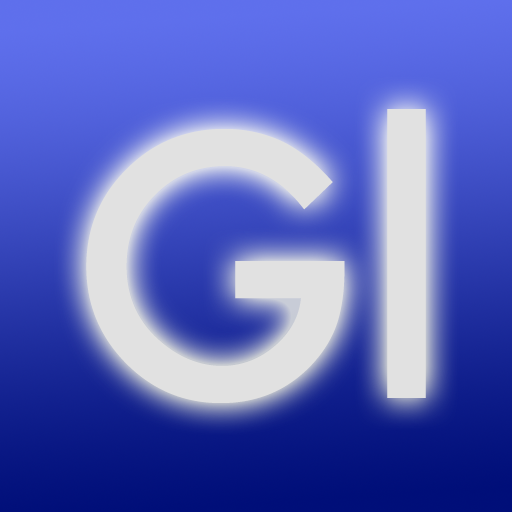
<style>
.page{position:relative;width:512px;height:512px}
.page>*{position:absolute;margin:0}
.t1{font:350px "Futura-Medium";color:#e1e1e1}
</style>
<div class="page">
<p class="t1" style="left:86px;top:109px;width:340px;height:294px">Gl</p>
</div>
